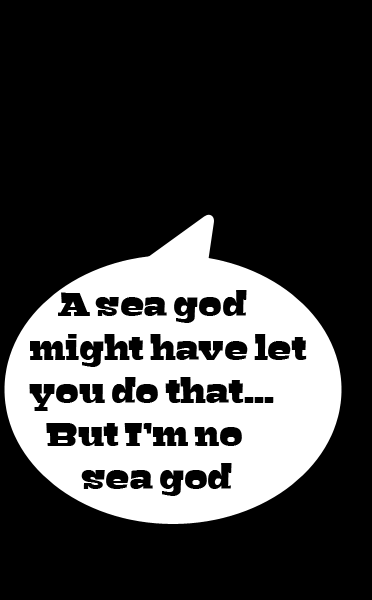
<style>
.page{position:relative;width:372px;height:600px;background:#000000}
.page>*{position:absolute;margin:0}
.t1{font:36px "Bigfish-Black";color:#000000}
</style>
<div class="page">
<p class="t1" style="left:29px;top:290px;width:278px;height:206px">A sea god might have let you do that... <br>   But I’m no <br>         sea god</p>
</div>
